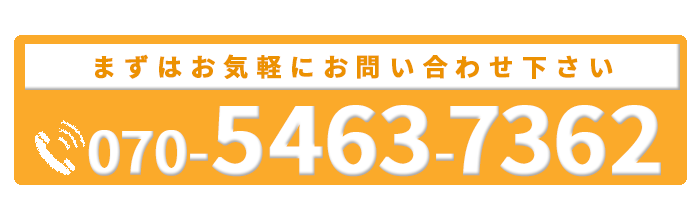
<style>
.page{position:relative;width:700px;height:200px;background:#ffffff}
.page>*{position:absolute;margin:0}
.t1{font:25px "SourceHanSansJP-Bold";letter-spacing:0.3em;color:#ec9101;font-weight:bold}
.t2{font:59.9px "SourceHanSansJP-Bold";letter-spacing:0.1em;color:#ffffff;font-weight:bold}
.t3{font:93.6px "SourceHanSansJP-Bold";letter-spacing:0.1em;color:#ffffff;font-weight:bold}
</style>
<div class="page">
<p class="t1" style="left:95px;top:54px;width:518px;height:25px">まずはお気軽にお問い合わせ下さい</p>
<p class="t2" style="left:88px;top:105px;width:573px;height:72px">070-<span class="t3">5463</span>-<span class="t3">7362</span></p>
</div>
